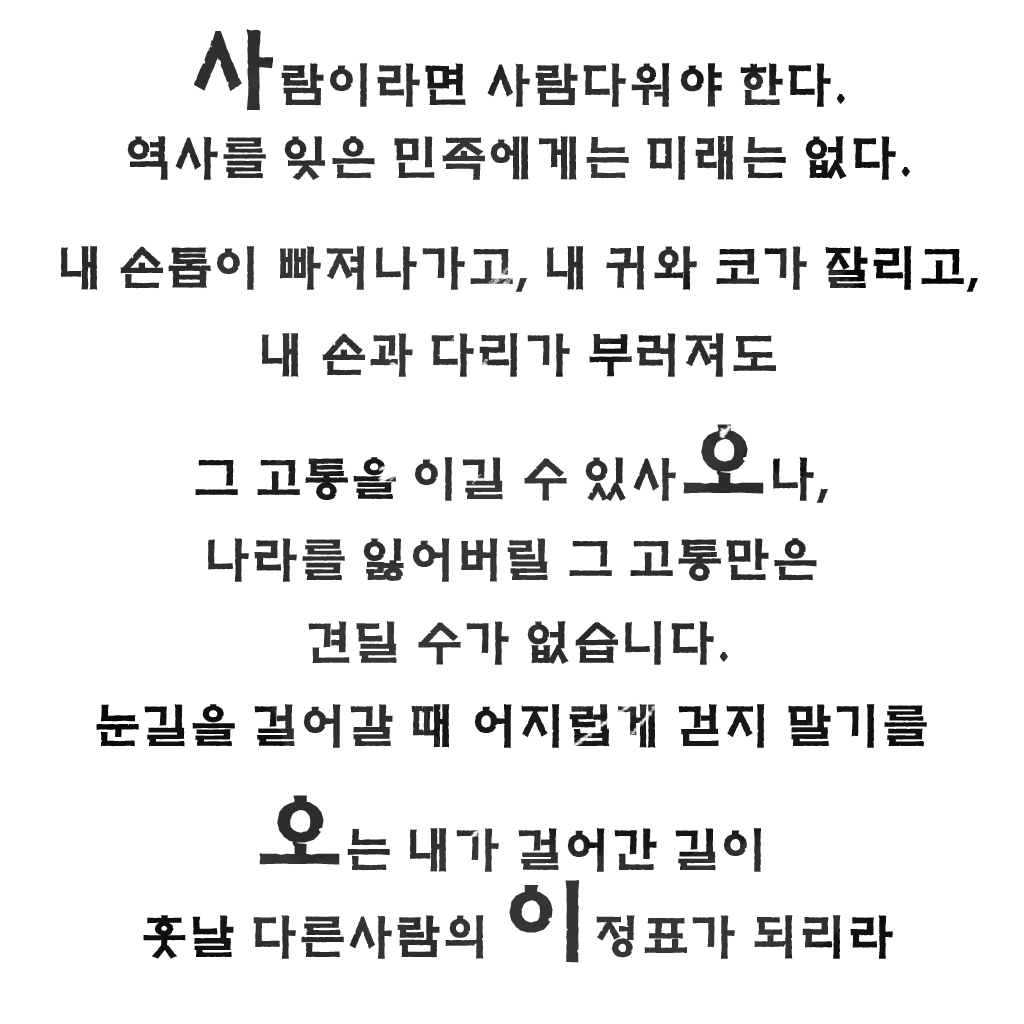
<style>
.page{position:relative;width:1024px;height:1024px;background:#ffffff}
.page>*{position:absolute;margin:0}
.t1{font:48px/87px "Yj-CHMSOOT-Bold";color:#2d2d2d}
.t2{font:90px/110px "Yj-CHMSOOT-Bold";color:#2d2d2d}
.t3{font:48px/110px "Yj-CHMSOOT-Bold";color:#2d2d2d}
.t4{font:48px/118px "Yj-CHMSOOT-Bold";color:#2d2d2d}
.t5{font:90px/118px "Yj-CHMSOOT-Bold";color:#2d2d2d}
.t6{font:48px/83px "Yj-CHMSOOT-Bold";color:#2d2d2d}
.t7{font:90px/87px "Yj-CHMSOOT-Bold";color:#2d2d2d}
</style>
<div class="page">
<p class="t1" style="left:61px;top:29px;width:917px;height:934px;text-align:center"><span class="t2">사</span><span class="t3">람이라면 사람다워야 한다.<br>역사를 잊은 민족에게는 미래는 없다.<br></span>내 손톱이 빠져나가고, 내 귀와 코가 잘리고,<br> 내 손과 다리가 부러져도 <br><span class="t4">그 고통을 이길 수 있사</span><span class="t5">오</span><span class="t4">나, <br></span><span class="t6">나라를 잃어버릴 그 고통만은 <br>견딜 수가 없습니다.<br></span>눈길을 걸어갈 때 어지럽게 걷지 말기를 <br><span class="t7">오</span>는 내가 걸어간 길이 <br>훗날 다른사람의 <span class="t7">이</span>정표가 되리라</p>
</div>
